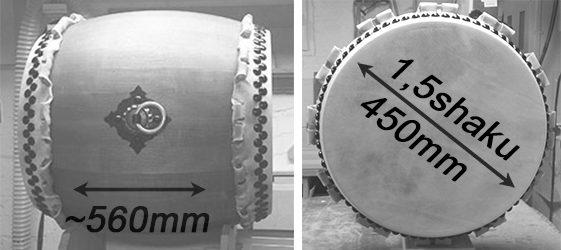
<style>
.page{position:relative;width:561px;height:250px}
.page>*{position:absolute;margin:0}
.t1{font:36px/47px "ArialMT";color:#000000;font-weight:bold;font-style:italic}
.t2{font:36px "ArialMT";color:#000000;font-weight:bold;font-style:italic}
</style>
<div class="page">
<p class="t1" style="left:360px;top:59px;width:160px;height:123px;rotate:36deg">1,5shaku<br>450mm</p>
<p class="t2" style="left:65px;top:206px;width:145px;height:27px">~560mm</p>
</div>
